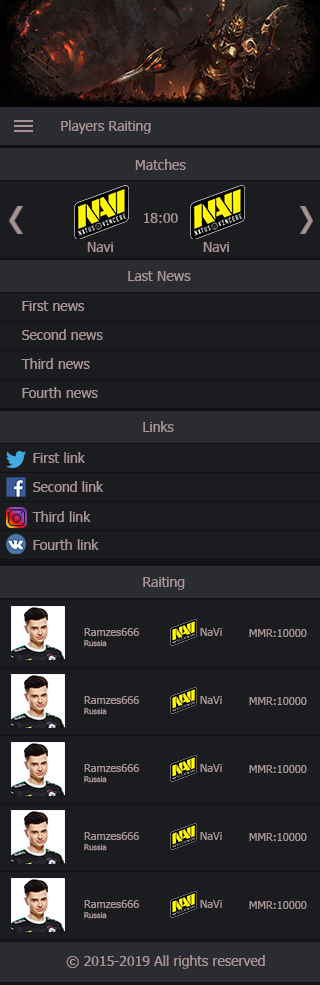
<style>
.page{position:relative;width:320px;height:985px;background:#1b1c20}
.page>*{position:absolute;margin:0}
.t1{font:14px "Tahoma";color:#a89494}
.t2{font:11px "Tahoma";color:#a89494}
.t3{font:8px "Tahoma";color:#a89494}
</style>
<div class="page">
<p class="t1" style="left:61px;top:120px;width:90px;height:14px">Players Raiting</p>
<p class="t1" style="left:135px;top:159px;width:51px;height:11px">Matches</p>
<p class="t1" style="left:144px;top:213px;width:34px;height:10px">18:00</p>
<p class="t1" style="left:87px;top:242px;width:26px;height:10px">Navi</p>
<p class="t1" style="left:203px;top:242px;width:26px;height:10px">Navi</p>
<p class="t1" style="left:128px;top:271px;width:63px;height:10px">Last News</p>
<p class="t1" style="left:22px;top:301px;width:63px;height:10px">First news</p>
<p class="t1" style="left:22px;top:329px;width:81px;height:11px">Second news</p>
<p class="t1" style="left:21px;top:358px;width:69px;height:11px">Third news</p>
<p class="t1" style="left:22px;top:387px;width:76px;height:11px">Fourth news</p>
<p class="t1" style="left:143px;top:421px;width:31px;height:11px">Links</p>
<p class="t1" style="left:33px;top:452px;width:52px;height:11px">First link</p>
<p class="t1" style="left:33px;top:481px;width:71px;height:11px">Second link</p>
<p class="t1" style="left:32px;top:511px;width:59px;height:11px">Third link</p>
<p class="t1" style="left:33px;top:539px;width:66px;height:11px">Fourth link</p>
<p class="t1" style="left:143px;top:577px;width:42px;height:13px">Raiting</p>
<p class="t2" style="left:84px;top:628px;width:55px;height:19px">Ramzes666<br><span class="t3">Russia</span></p>
<p class="t2" style="left:200px;top:628px;width:22px;height:8px">NaVi</p>
<p class="t2" style="left:249px;top:629px;width:58px;height:8px">MMR:10000</p>
<p class="t2" style="left:84px;top:696px;width:55px;height:19px">Ramzes666<br><span class="t3">Russia</span></p>
<p class="t2" style="left:200px;top:696px;width:22px;height:8px">NaVi</p>
<p class="t2" style="left:249px;top:697px;width:58px;height:8px">MMR:10000</p>
<p class="t2" style="left:84px;top:764px;width:55px;height:19px">Ramzes666<br><span class="t3">Russia</span></p>
<p class="t2" style="left:200px;top:764px;width:22px;height:8px">NaVi</p>
<p class="t2" style="left:249px;top:765px;width:58px;height:8px">MMR:10000</p>
<p class="t2" style="left:84px;top:832px;width:55px;height:19px">Ramzes666<br><span class="t3">Russia</span></p>
<p class="t2" style="left:200px;top:832px;width:22px;height:8px">NaVi</p>
<p class="t2" style="left:249px;top:833px;width:58px;height:8px">MMR:10000</p>
<p class="t2" style="left:84px;top:900px;width:55px;height:19px">Ramzes666<br><span class="t3">Russia</span></p>
<p class="t2" style="left:200px;top:900px;width:22px;height:8px">NaVi</p>
<p class="t2" style="left:249px;top:901px;width:58px;height:8px">MMR:10000</p>
<p class="t1" style="left:66px;top:955px;width:199px;height:14px">© 2015-2019 All rights reserved</p>
</div>
